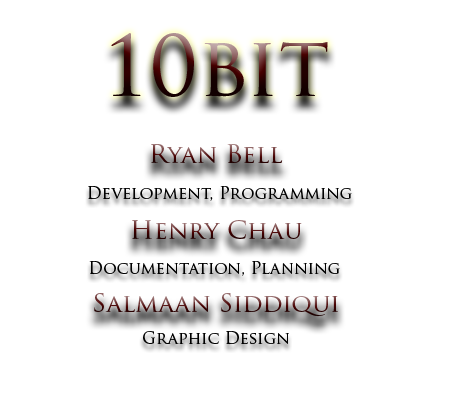
<style>
.page{position:relative;width:450px;height:400px;background:#ffffff}
.page>*{position:absolute;margin:0}
.t1{font:83.3px "TrajanPro-Regular"}
.t2{font:25px "TrajanPro-Regular"}
.t3{font:16.7px "TrajanPro-Regular";color:#000000}
</style>
<div class="page">
<p class="t1" style="left:111px;top:33px;width:217px;height:64px">10bit</p>
<p class="t2" style="left:151px;top:144px;width:132px;height:19px">Ryan Bell</p>
<p class="t3" style="left:88px;top:186px;width:264px;height:15px">Development, Programming</p>
<p class="t2" style="left:132px;top:220px;width:170px;height:19px">Henry Chau</p>
<p class="t3" style="left:89px;top:261px;width:251px;height:15px">Documentation, Planning</p>
<p class="t2" style="left:94px;top:293px;width:244px;height:24px">Salmaan Siddiqui</p>
<p class="t3" style="left:143px;top:331px;width:146px;height:14px">Graphic Design</p>
</div>
